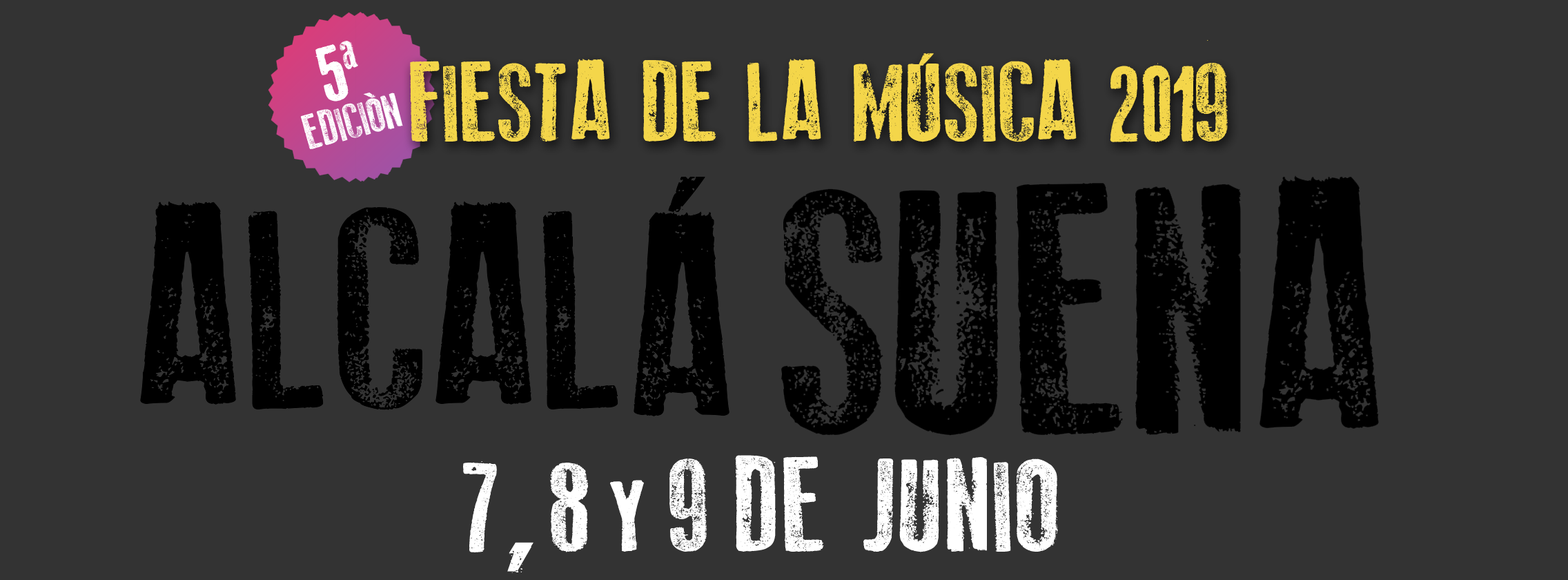
<style>
.page{position:relative;width:1568px;height:580px;background:#333333}
.page>*{position:absolute;margin:0}
.t1{font:48.4px/40.7px "OldPress";color:#ffffff}
.t2{font:82.3px/40.7px "OldPress";color:#ffffff}
.t3{font:111.5px "OldPress";color:#f4d64a}
.t4{font:131.8px "OldPress";letter-spacing:0.01em;color:#ffffff}
.t5{font:131.8px "OldPress";letter-spacing:0.05em;color:#ffffff}
.t6{font:131.8px "OldPress";letter-spacing:-0.09em;color:#ffffff}
.t7{font:131.8px "OldPress";letter-spacing:-0.05em;color:#ffffff}
.t8{font:102.2px "OldPress";letter-spacing:-0.05em;color:#ffffff}
</style>
<div class="page">
<p class="t1" style="left:300px;top:41px;width:103px;height:108px;text-align:center;rotate:-14deg"><span class="t2">5a<br></span>EDICIÓN</p>
<p class="t3" style="left:410px;top:40px;width:818px;height:102px">FIESTA DE LA MÚSICA 2019</p>
<p class="t4" style="left:463px;top:455px;width:595px;height:118px"><span class="t5">7</span><span class="t6">,</span><span class="t7"> 8 </span><span class="t8">Y</span><span class="t7"> 9 </span>DE JUNIO</p>
</div>
